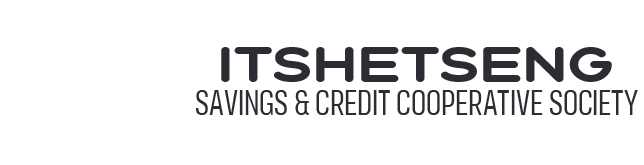
<style>
.page{position:relative;width:644px;height:165px;background:#ffffff}
.page>*{position:absolute;margin:0}
.t1{font:50px "Aqumtwo-Classic";color:#2e2b32;scale:1.2 1}
.t2{font:36px "Organetto-LightUltraCnd";color:#2e2b32;scale:0.91 1}
</style>
<div class="page">
<p class="t1" style="left:221px;top:47px;width:391px;height:35px">ITSHETSENG</p>
<p class="t2" style="left:196px;top:90px;width:442px;height:25px">SAVINGS &amp; CREDIT COOPERATIVE SOCIETY</p>
</div>
